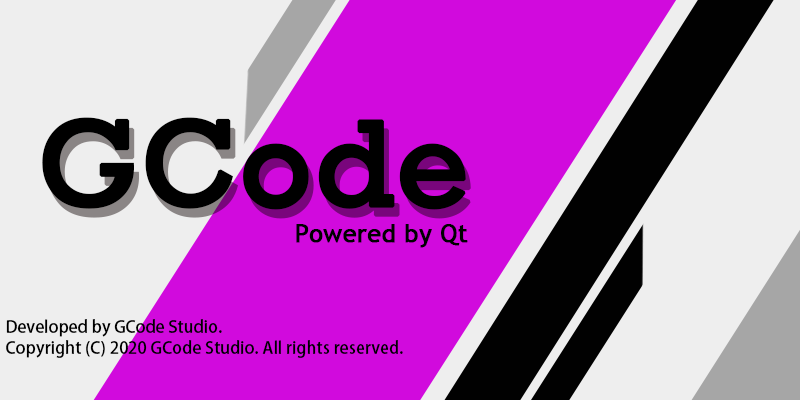
<style>
.page{position:relative;width:800px;height:400px;background:#eeeeee}
.page>*{position:absolute;margin:0}
.t1{font:125.1px "Rockwell";color:#000000;font-weight:bold}
.t2{font:25px "TrebuchetMS";color:#000000;font-weight:bold}
.t3{font:16.7px/20.9px "AdobeHeitiStd-Regular";color:#000000}
</style>
<div class="page">
<p class="t1" style="left:42px;top:117px;width:424px;height:93px">GCode</p>
<p class="t2" style="left:296px;top:224px;width:172px;height:24px">Powered by Qt</p>
<p class="t3" style="left:6px;top:319px;width:397px;height:39px">Developed by GCode Studio.<br>Copyright (C) 2020 GCode Studio. All rights reserved.</p>
</div>
